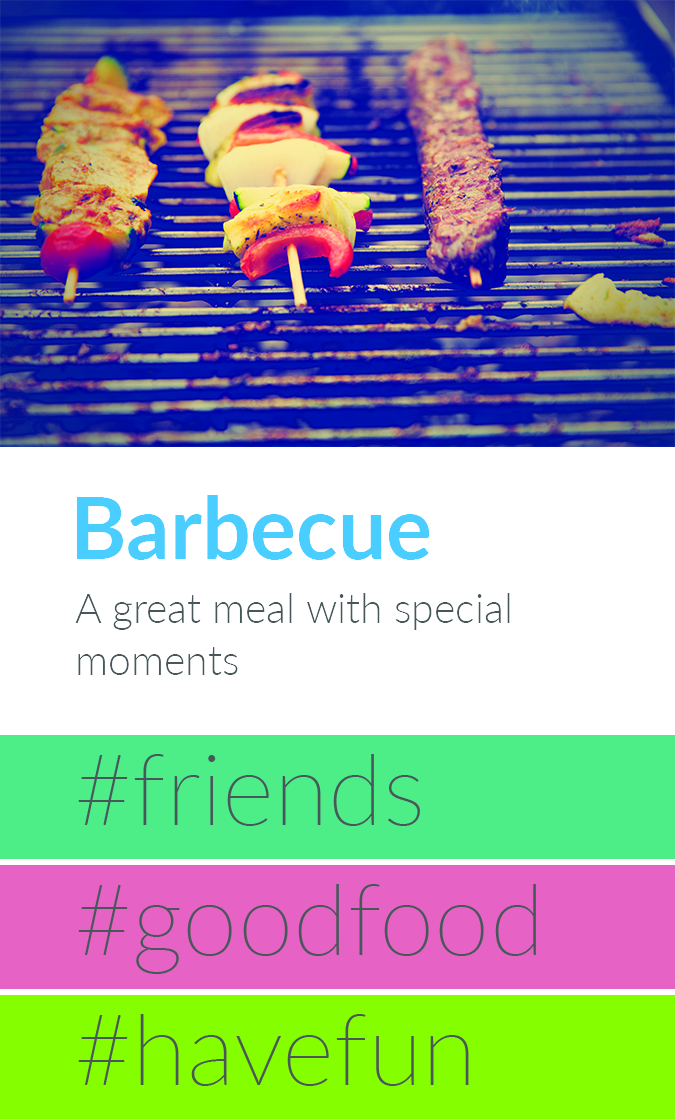
<style>
.page{position:relative;width:675px;height:1119px;background:#ffffff}
.page>*{position:absolute;margin:0}
.t1{font:86px "Lato-Bold";color:#4acdff}
.t2{font:41px/52px "Lato-Light";color:#48585a}
</style>
<div class="page">
<p class="t1" style="left:76px;top:495px;width:354px;height:65px">Barbecue</p>
<p class="t2" style="left:75px;top:593px;width:435px;height:82px;text-align:right">A great meal with special moments</p>
</div>
